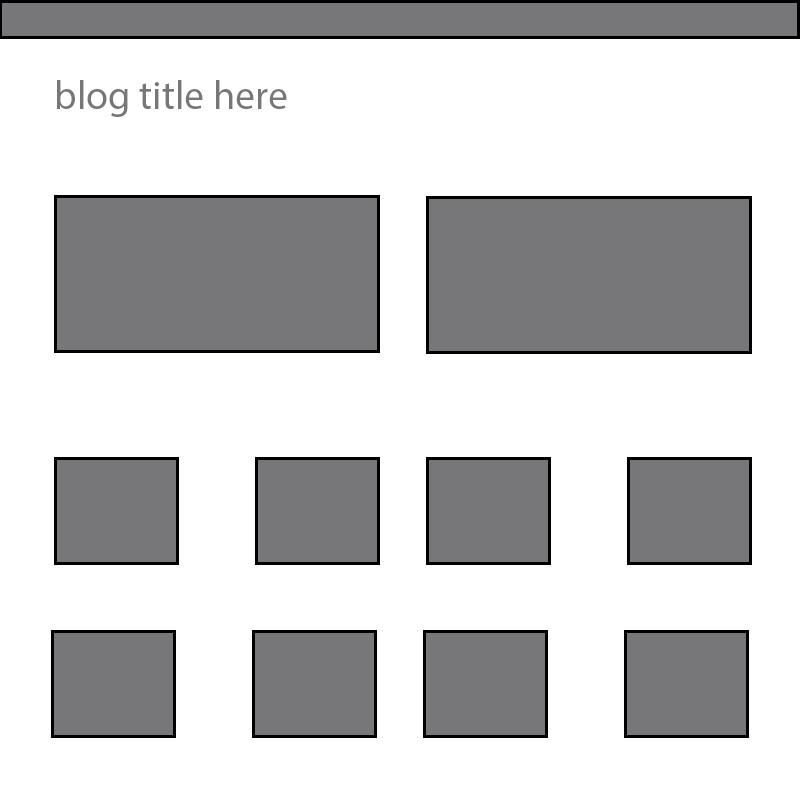
<style>
.page{position:relative;width:800px;height:800px;background:#ffffff}
.page>*{position:absolute;margin:0}
.t1{font:40px "MyriadPro-Regular";color:#77777a}
</style>
<div class="page">
<p class="t1" style="left:56px;top:80px;width:231px;height:37px">blog title here</p>
</div>
